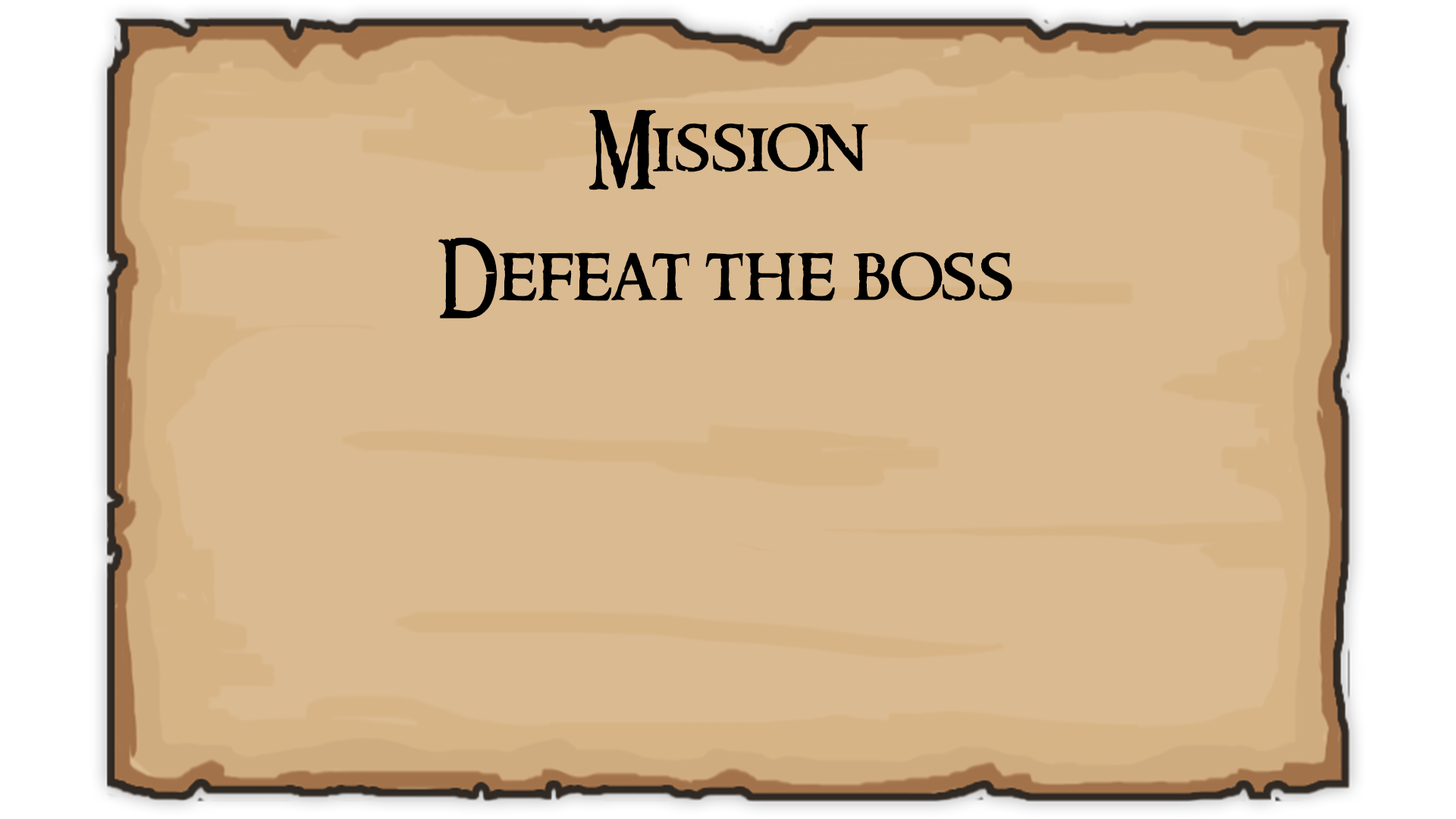
<style>
.page{position:relative;width:1456px;height:819px;background:#daba91}
.page>*{position:absolute;margin:0}
.t1{font:75.8px "RingbearerMedium";color:#000000}
</style>
<div class="page">
<p class="t1" style="left:588px;top:110px;width:280px;height:80px">Mission</p>
<p class="t1" style="left:438px;top:237px;width:574px;height:81px">Defeat the boss</p>
</div>
